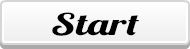
<style>
.page{position:relative;width:190px;height:49px}
.page>*{position:absolute;margin:0}
.t1{font:30px "Lobster1.4";color:#000000;scale:1.44 1}
</style>
<div class="page">
<p class="t1" style="left:52px;top:12px;width:87px;height:24px">Start</p>
</div>
